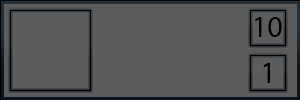
<style>
.page{position:relative;width:300px;height:100px;background:#5c5c5c}
.page>*{position:absolute;margin:0}
.t1{font:30px "MyriadPro-Regular";color:#000000}
</style>
<div class="page">
<p class="t1" style="left:255px;top:17px;width:27px;height:20px">10</p>
<p class="t1" style="left:263px;top:63px;width:7px;height:20px">1</p>
</div>
